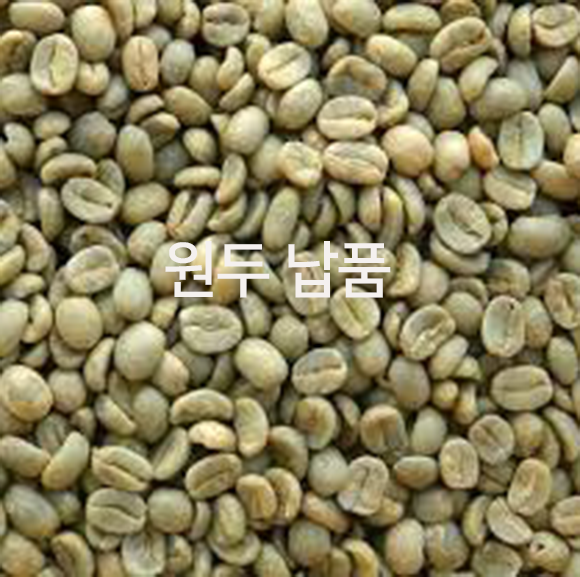
<style>
.page{position:relative;width:580px;height:577px}
.page>*{position:absolute;margin:0}
.t1{font:61.3px "NanumSquare_acB";color:#f5f1ef}
</style>
<div class="page">
<p class="t1" style="left:165px;top:241px;width:226px;height:57px">원두 납품</p>
</div>
